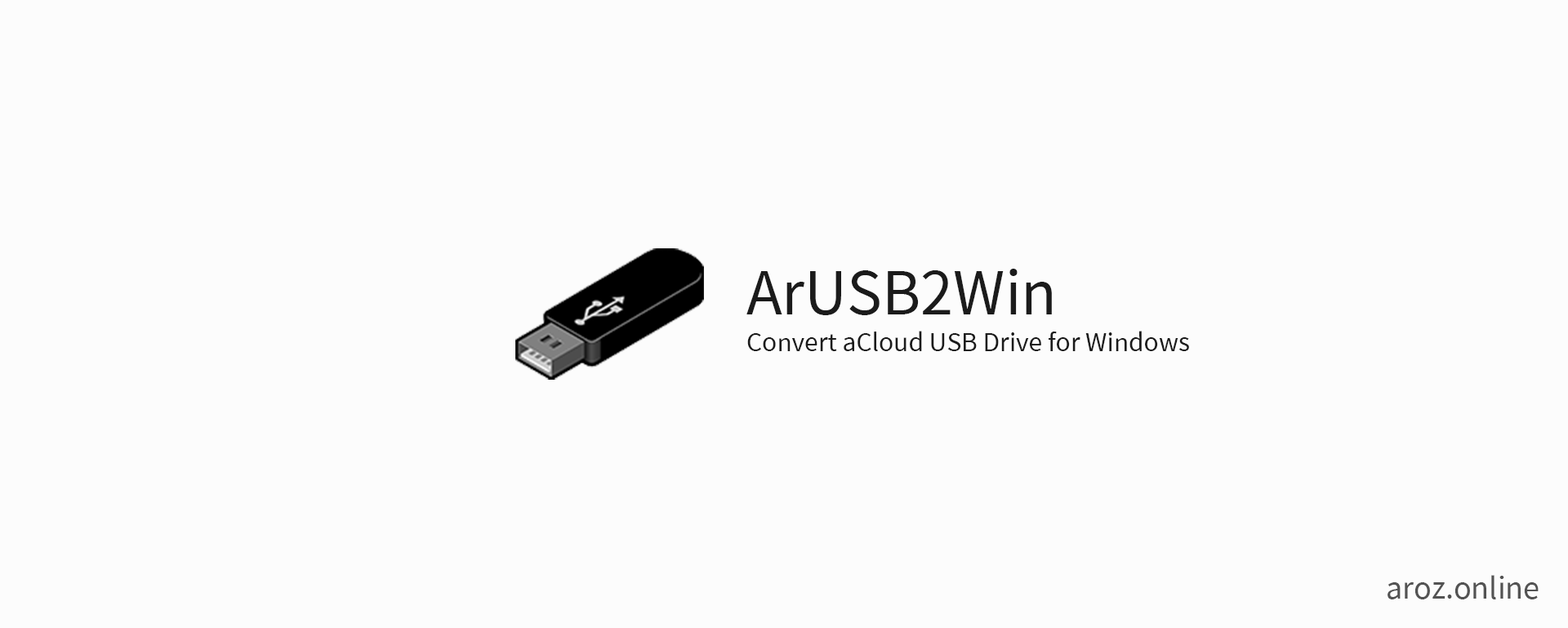
<style>
.page{position:relative;width:1568px;height:628px;background:#fcfcfc}
.page>*{position:absolute;margin:0}
.t1{font:58.8px "TaipeiSansTCBeta-Regular";color:#1b1b1b}
.t2{font:24.5px "TaipeiSansTCBeta-Regular";color:#1b1b1b}
.t3{font:29.4px "TaipeiSansTCBeta-Regular";color:#535353}
</style>
<div class="page">
<p class="t1" style="left:746px;top:269px;width:306px;height:46px">ArUSB2Win</p>
<p class="t2" style="left:747px;top:331px;width:442px;height:20px">Convert aCloud USB Drive for Windows</p>
<p class="t3" style="left:1388px;top:575px;width:151px;height:24px">aroz.online</p>
</div>
